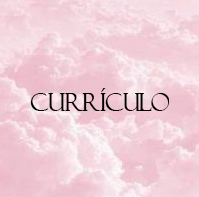
<style>
.page{position:relative;width:199px;height:197px}
.page>*{position:absolute;margin:0}
.t1{font:24px "FelixTitlingMT";letter-spacing:-0.05em;color:#000000}
</style>
<div class="page">
<p class="t1" style="left:30px;top:88px;width:139px;height:23px">Currículo</p>
</div>
